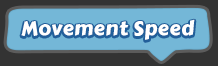
<style>
.page{position:relative;width:218px;height:66px;background:#74b7d7}
.page>*{position:absolute;margin:0}
.t1{font:20px "CarterOne";letter-spacing:0.025em;color:#ffffff}
</style>
<div class="page">
<p class="t1" style="left:21px;top:19px;width:174px;height:21px">Movement Speed</p>
</div>
